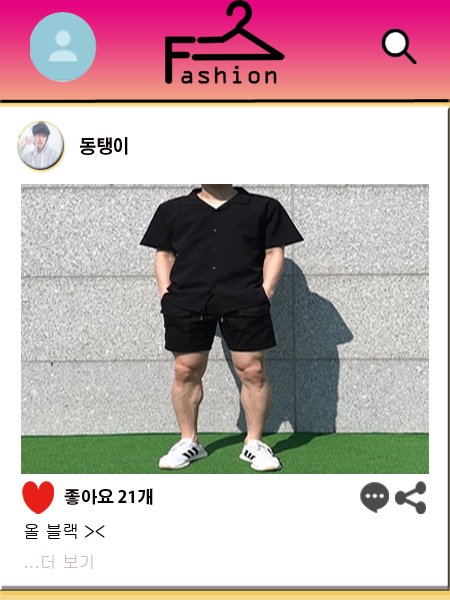
<style>
.page{position:relative;width:450px;height:600px;background:#ffffff}
.page>*{position:absolute;margin:0}
.t1{font:18.3px "AdobeGothicStd-Bold";color:#0a0106;scale:0.91 1}
.t2{font:16.7px "AdobeGothicStd-Bold";color:#0a0106}
.t3{font:18.3px "Gulim";color:#0a0106;scale:0.91 1}
.t4{font:16.7px "Gulim";color:#cfbcbc}
</style>
<div class="page">
<p class="t1" style="left:80px;top:137px;width:48px;height:18px">동탱이</p>
<p class="t2" style="left:64px;top:488px;width:89px;height:17px">좋아요 21개</p>
<p class="t3" style="left:24px;top:524px;width:81px;height:15px">올 블랙 &gt;&lt;</p>
<p class="t4" style="left:25px;top:555px;width:68px;height:14px">...더 보기</p>
</div>
